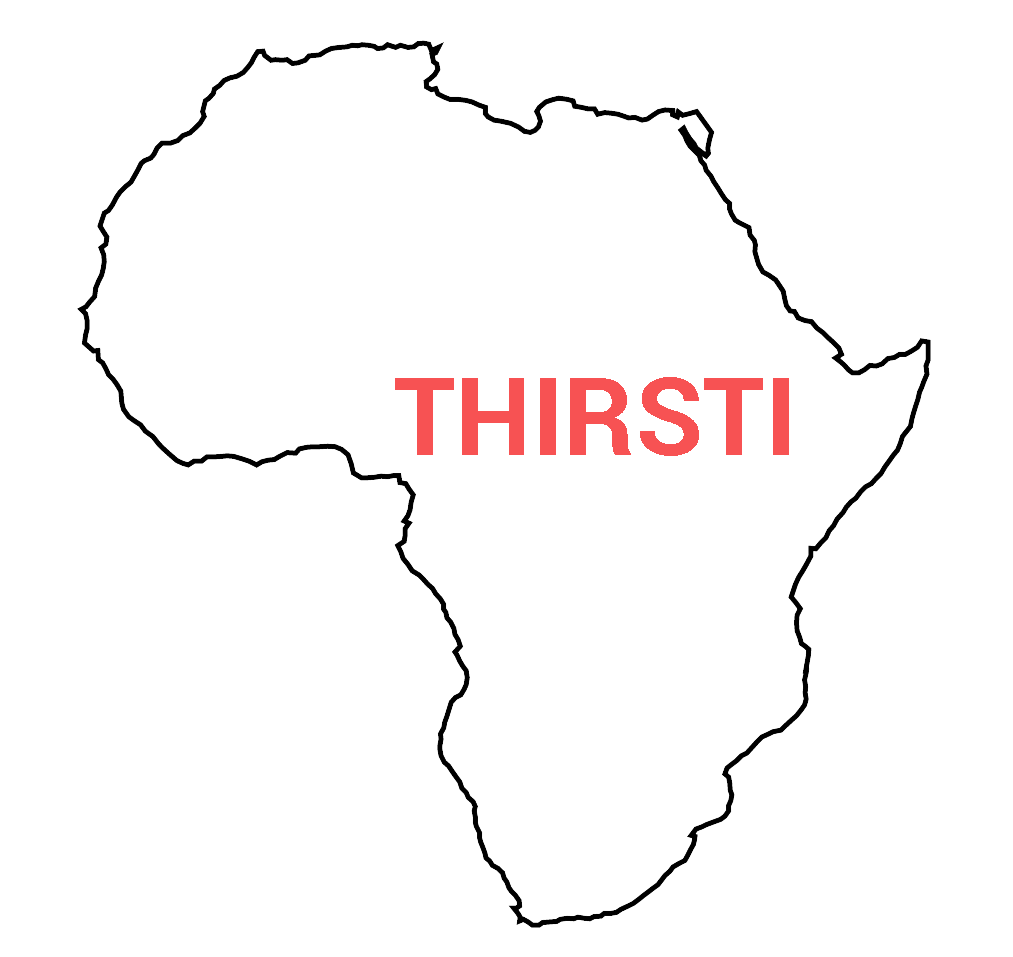
<style>
.page{position:relative;width:1013px;height:957px;background:#ffffff}
.page>*{position:absolute;margin:0}
.t1{font:108px "Roboto-Bold";color:#f75253}
</style>
<div class="page">
<p class="t1" style="left:395px;top:377px;width:394px;height:79px">THIRSTI</p>
</div>
